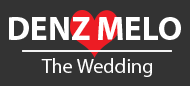
<style>
.page{position:relative;width:190px;height:86px;background:#333333}
.page>*{position:absolute;margin:0}
.t1{font:33.3px "MyriadPro-Bold";color:#ffffff}
.t2{font:20.3px "MyriadPro-Regular";color:#ffffff}
</style>
<div class="page">
<p class="t1" style="left:9px;top:17px;width:172px;height:23px">DENZ MELO</p>
<p class="t2" style="left:41px;top:58px;width:111px;height:19px">The Wedding</p>
</div>
